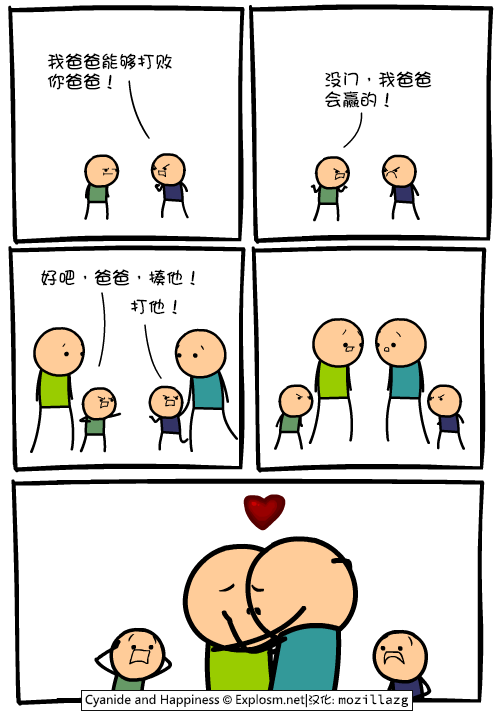
<style>
.page{position:relative;width:500px;height:720px;background:#ffffff}
.page>*{position:absolute;margin:0}
.t1{font:18px/20px "DFGirl";color:#000000}
.t2{font:18px "DFGirl";color:#000000}
</style>
<div class="page">
<p class="t1" style="left:47px;top:53px;width:125px;height:37px">我爸爸能够打败<br>你爸爸！</p>
<p class="t1" style="left:325px;top:71px;width:107px;height:37px">没门，我爸爸<br>会赢的！</p>
<p class="t2" style="left:41px;top:269px;width:154px;height:17px">好吧，爸爸，揍他！</p>
<p class="t2" style="left:130px;top:298px;width:47px;height:17px">打他！</p>
</div>
